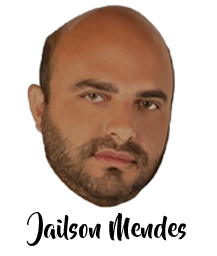
<style>
.page{position:relative;width:217px;height:256px;background:#ffffff}
.page>*{position:absolute;margin:0}
.t1{font:26px "BeyondTheMountains";color:#040200}
</style>
<div class="page">
<p class="t1" style="left:26px;top:212px;width:160px;height:34px">Jailson Mendes</p>
</div>
